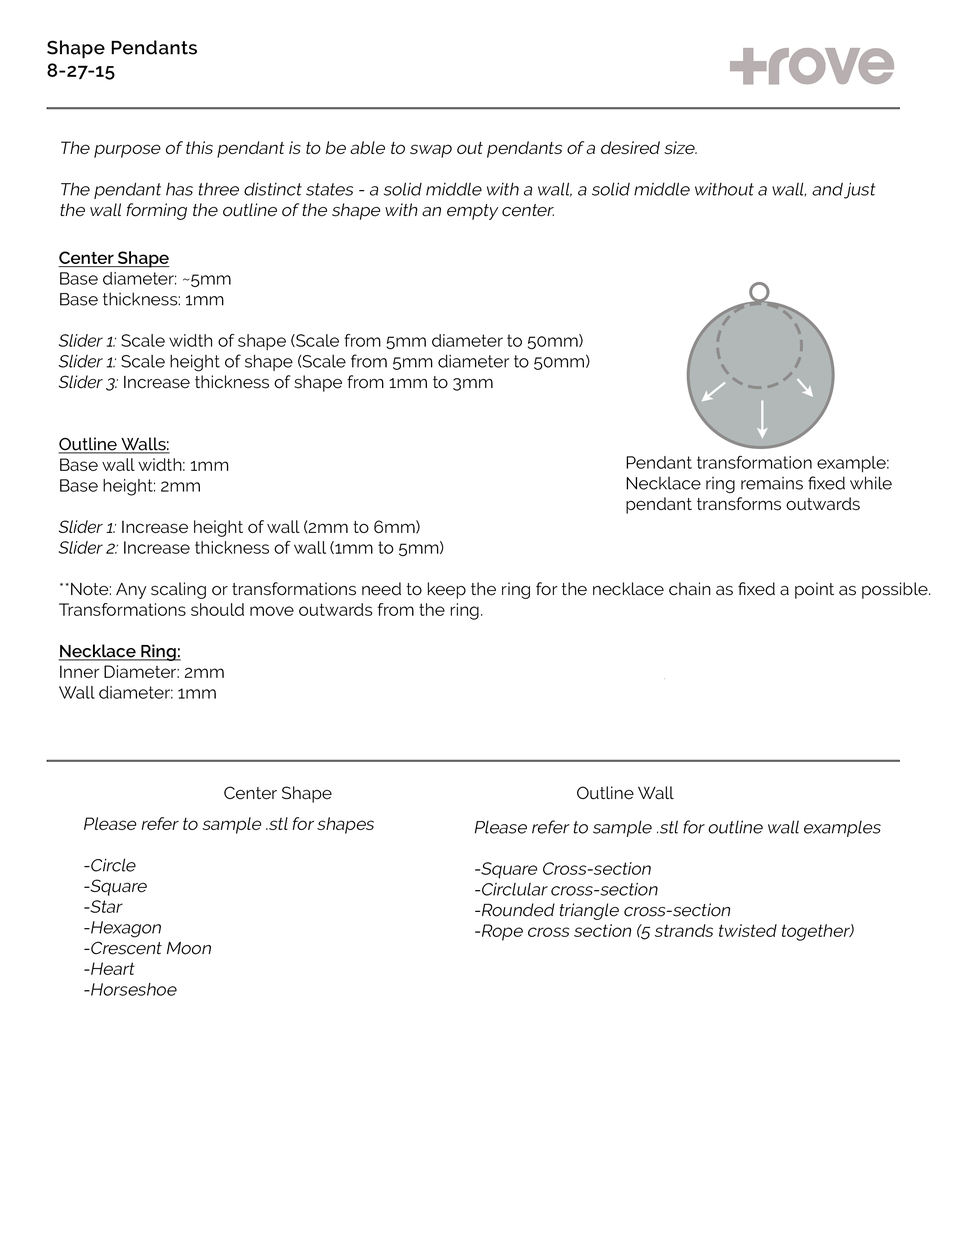
<style>
.page{position:relative;width:960px;height:1242px;background:#ffffff}
.page>*{position:absolute;margin:0}
.t1{font:18.8px "Raleway-SemiBold";letter-spacing:0.025em;color:#000000}
.t2{font:17.3px "Raleway-Regular";color:#000000;font-style:italic}
.t3{font:17.3px "Raleway-Regular";color:#000000}
.t4{font:17.3px "Raleway-SemiBold";color:#000000;text-decoration:underline}
.t5{font:17.3px "Raleway-Italic";color:#000000}
.t6{font:17.3px "Raleway-Medium";color:#000000;text-decoration:underline}
</style>
<div class="page">
<p class="t1" style="left:47px;top:40px;width:150px;height:40px">Shape Pendants<br>8-27-15</p>
<p class="t2" style="left:61px;top:141px;width:815px;height:79px">The purpose of this pendant is to be able to swap out pendants of a desired size.<br><br>The pendant has three distinct states - a solid middle with a wall, a solid middle without a wall, and just the wall forming the outline of the shape with an empty center.</p>
<p class="t3" style="left:58px;top:251px;width:872px;height:448px"><span class="t4">Center Shape</span><br>Base diameter: ~5mm<br>Base thickness: 1mm<br><span class="t5"><br>Slider 1: </span>Scale width of shape (Scale from 5mm diameter to 50mm)<br><span class="t5">Slider 1: </span>Scale height of shape (Scale from 5mm diameter to 50mm)<br><span class="t5">Slider 3: </span>Increase thickness of shape from 1mm to 3mm<br><br><br><span class="t6">Outline Walls:<br></span>Base wall width: 1mm<br>Base height: 2mm<br><br><span class="t5">Slider 1: </span>Increase height of wall (2mm to 6mm)<br><span class="t5">Slider 2: </span>Increase thickness of wall (1mm to 5mm)<br><br>**Note: Any scaling or transformations need to keep the ring for the necklace chain as fixed a point as possible. Transformations should move outwards from the ring.<br><br><span class="t4">Necklace Ring:<br></span>Inner Diameter: 2mm<br>Wall diameter: 1mm</p>
<p class="t3" style="left:626px;top:456px;width:266px;height:58px">Pendant transformation example:<br>Necklace ring remains fixed while pendant transforms outwards</p>
<p class="t3" style="left:224px;top:786px;width:108px;height:17px">Center Shape</p>
<p class="t3" style="left:577px;top:786px;width:97px;height:14px">Outline Wall</p>
<p class="t2" style="left:84px;top:817px;width:290px;height:179px">Please refer to sample .stl for shapes<br><br>-Circle<br>-Square<br>-Star<br>-Hexagon<br>-Crescent Moon<br>-Heart<br>-Horseshoe</p>
<p class="t2" style="left:475px;top:821px;width:406px;height:120px">Please refer to sample .stl for outline wall examples<br><br>-Square Cross-section<br>-Circlular cross-section<br>-Rounded triangle cross-section<br>-Rope cross section (5 strands twisted together)</p>
</div>
